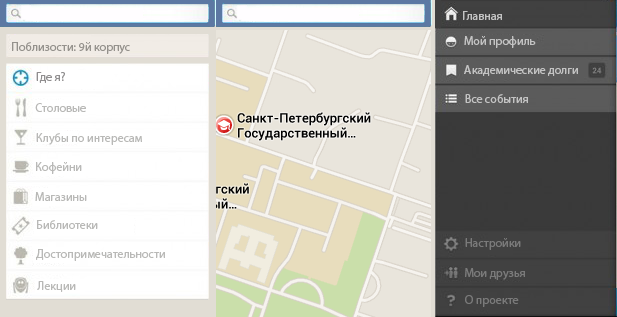
<style>
.page{position:relative;width:617px;height:317px}
.page>*{position:absolute;margin:0}
.t1{font:12px "MyriadPro-Regular";color:#c3c3c3}
.t2{font:12px "MyriadPro-Regular";color:#95928d}
.t3{font:12px "MyriadPro-Regular";color:#908e8f}
.t4{font:12px "MyriadPro-Regular";color:#b9b9b7}
.t5{font:12px "MyriadPro-Regular";color:#7a7a7a}
</style>
<div class="page">
<p class="t1" style="left:463px;top:11px;width:39px;height:9px">Главная</p>
<p class="t1" style="left:464px;top:36px;width:72px;height:12px">Мой профиль</p>
<p class="t2" style="left:12px;top:42px;width:118px;height:12px">Поблизости: 9й корпус</p>
<p class="t1" style="left:464px;top:65px;width:114px;height:11px">Академические долги</p>
<p class="t3" style="left:36px;top:72px;width:29px;height:11px">Где я?</p>
<p class="t1" style="left:465px;top:94px;width:63px;height:9px">Все события</p>
<p class="t4" style="left:35px;top:103px;width:51px;height:9px">Столовые</p>
<p class="t4" style="left:36px;top:133px;width:106px;height:12px">Клубы по интересам</p>
<p class="t4" style="left:36px;top:162px;width:46px;height:12px">Кофейни</p>
<p class="t4" style="left:35px;top:192px;width:52px;height:9px">Магазины</p>
<p class="t4" style="left:37px;top:220px;width:61px;height:9px">Библиотеки</p>
<p class="t5" style="left:465px;top:238px;width:56px;height:12px">Настройки</p>
<p class="t4" style="left:36px;top:249px;width:129px;height:12px">Достопримечательности</p>
<p class="t5" style="left:465px;top:268px;width:60px;height:12px">Мои друзья</p>
<p class="t4" style="left:37px;top:281px;width:39px;height:11px">Лекции</p>
<p class="t5" style="left:465px;top:295px;width:54px;height:12px">О проекте</p>
</div>
